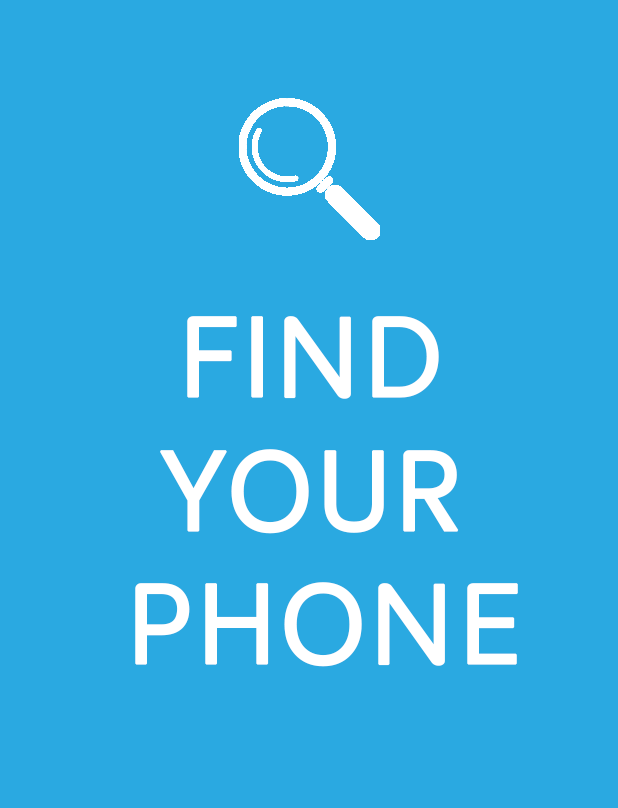
<style>
.page{position:relative;width:618px;height:808px;background:#2aa9e1}
.page>*{position:absolute;margin:0}
.t1{font:111.2px "Intelo-Regular";color:#ffffff;text-transform:uppercase;font-weight:bold}
</style>
<div class="page">
<p class="t1" style="left:135px;top:316px;width:383px;height:351px;text-align:center">find <br>your <br>phone</p>
</div>
